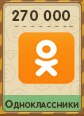
<style>
.page{position:relative;width:84px;height:116px;background:#eadab4}
.page>*{position:absolute;margin:0}
.t1{font:15px "RotondaC-Bold";letter-spacing:0.04em;color:#43341d;text-transform:uppercase}
.t2{font:11px "RotondaC-Bold";letter-spacing:0.04em;color:#43341d;font-variant:small-caps}
</style>
<div class="page">
<p class="t1" style="left:12px;top:10px;width:58px;height:11px">270 000</p>
<p class="t2" style="left:5px;top:100px;width:74px;height:10px">Одноклассники</p>
</div>
